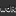
<style>
.page{position:relative;width:16px;height:16px;background:#333333}
.page>*{position:absolute;margin:0}
.t1{font:8px "Oblik-Bold";color:#252525}
</style>
<div class="page">
<p class="t1" style="left:0px;top:5px;width:16px;height:7px">wdR</p>
</div>
